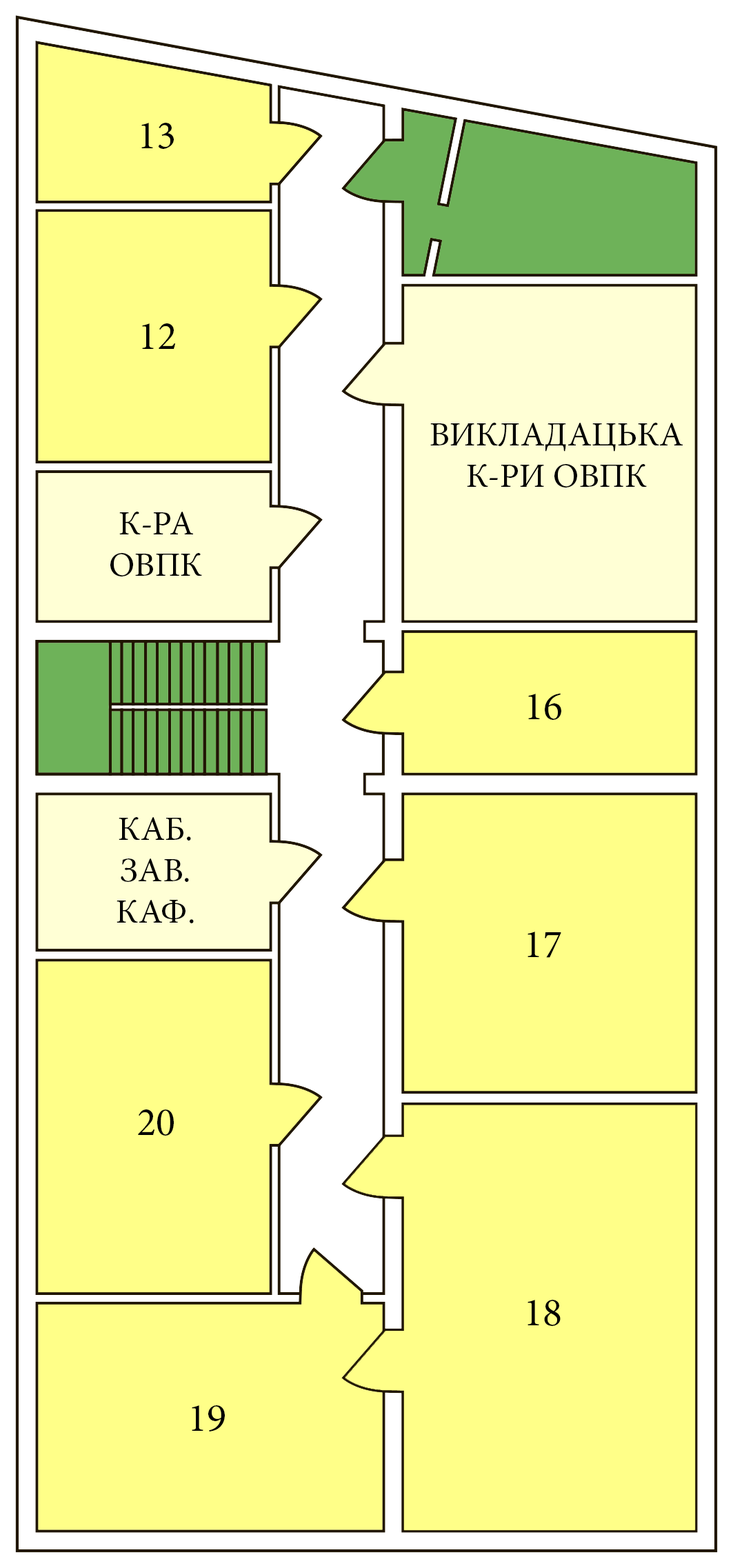
<style>
.page{position:relative;width:733px;height:1568px;background:#ffff88}
.page>*{position:absolute;margin:0}
.t1{font:40.2px "MinionPro-Regular";color:#000000}
.t2{font:34.4px "MinionPro-Regular";color:#000000}
</style>
<div class="page">
<p class="t1" style="left:141px;top:123px;width:33px;height:26px">13</p>
<p class="t1" style="left:142px;top:323px;width:34px;height:26px">12</p>
<p class="t2" style="left:430px;top:423px;width:253px;height:65px;text-align:center">ВИКЛАДАЦЬКА<br>К-РИ ОВПК</p>
<p class="t2" style="left:110px;top:512px;width:92px;height:64px;text-align:center">К-РА<br>ОВПК</p>
<p class="t1" style="left:528px;top:693px;width:33px;height:27px">16</p>
<p class="t2" style="left:117px;top:817px;width:77px;height:106px;text-align:center">КАБ.<br>ЗАВ.<br>КАФ.</p>
<p class="t1" style="left:527px;top:932px;width:34px;height:26px">17</p>
<p class="t1" style="left:138px;top:1109px;width:36px;height:27px">20</p>
<p class="t1" style="left:527px;top:1300px;width:34px;height:26px">18</p>
<p class="t1" style="left:192px;top:1405px;width:33px;height:26px">19</p>
</div>
